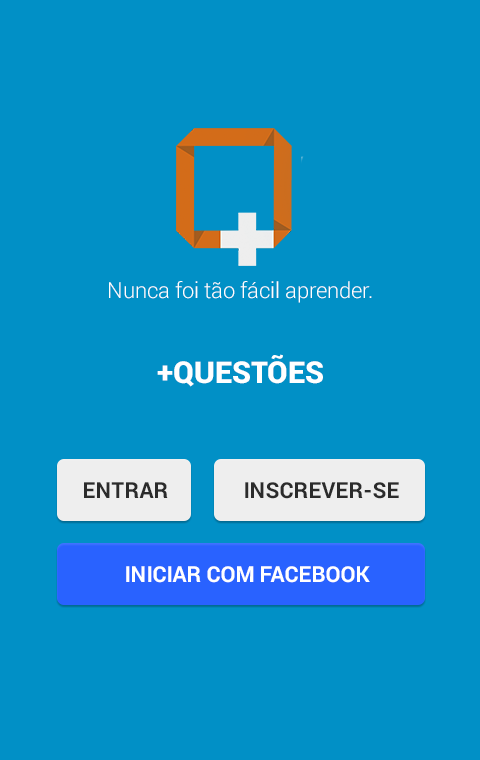
<style>
.page{position:relative;width:480px;height:760px;background:#0190c6}
.page>*{position:absolute;margin:0}
.t1{font:22px "Roboto-Light";color:#ffffff}
.t2{font:30px "Roboto-Black";color:#ffffff}
.t3{font:22px "Roboto-Bold";color:#2b2b2b}
.t4{font:22px "Roboto-Bold";color:#ffffff}
</style>
<div class="page">
<p class="t1" style="left:109px;top:281px;width:263px;height:22px">Nunca foi tão fácil aprender.</p>
<p class="t2" style="left:157px;top:354px;width:166px;height:33px">+QUESTÕES</p>
<p class="t3" style="left:84px;top:482px;width:84px;height:16px">ENTRAR</p>
<p class="t3" style="left:245px;top:482px;width:154px;height:17px">INSCREVER-SE</p>
<p class="t4" style="left:126px;top:566px;width:244px;height:17px">INICIAR COM FACEBOOK</p>
</div>
